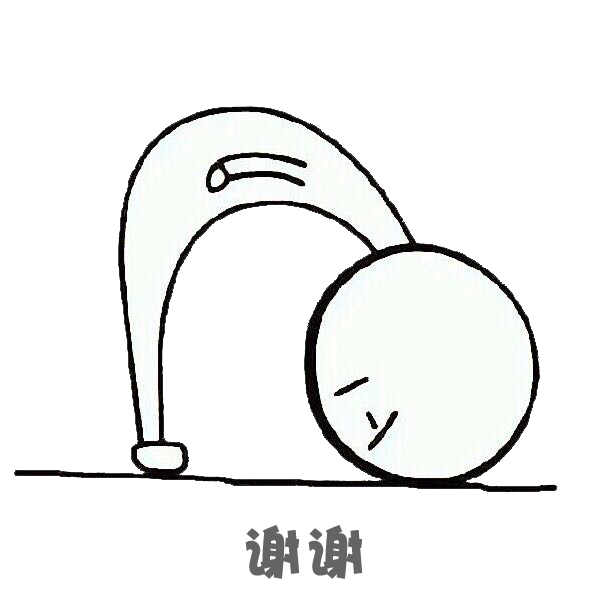
<style>
.page{position:relative;width:592px;height:616px;background:#ffffff}
.page>*{position:absolute;margin:0}
.t1{font:60px "DFPHaiBaoW12";letter-spacing:0.05em;color:#656464}
</style>
<div class="page">
<p class="t1" style="left:245px;top:525px;width:118px;height:54px">谢谢</p>
</div>
